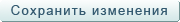
<style>
.page{position:relative;width:180px;height:22px}
.page>*{position:absolute;margin:0}
.t1{font:13px "ArialMT";letter-spacing:0.099em;color:#345a70}
</style>
<div class="page">
<p class="t1" style="left:11px;top:5px;width:156px;height:13px">Сохранить изменения</p>
</div>
